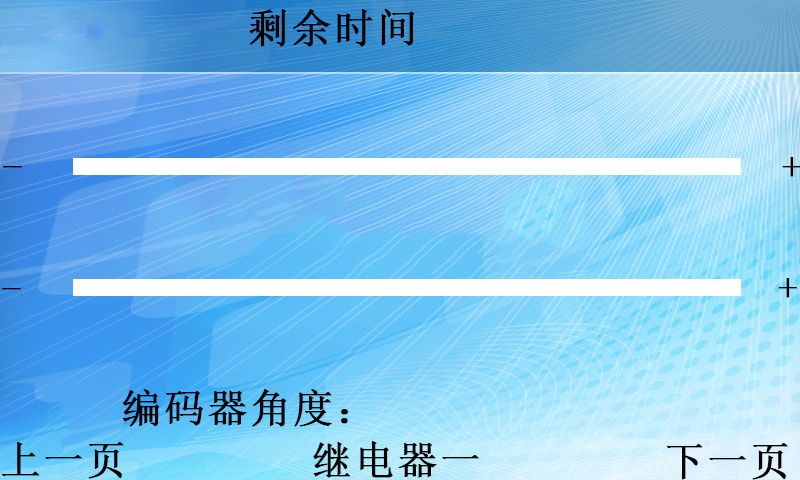
<style>
.page{position:relative;width:800px;height:480px}
.page>*{position:absolute;margin:0}
.t1{font:40px "SimSun";letter-spacing:0.05em;color:#000000;font-weight:bold}
</style>
<div class="page">
<p class="t1" style="left:249px;top:9px;width:166px;height:38px">剩余时间</p>
<p class="t1" style="left:782px;top:157px;width:19px;height:20px">+</p>
<p class="t1" style="left:3px;top:166px;width:19px;height:2px">-</p>
<p class="t1" style="left:778px;top:278px;width:19px;height:20px">+</p>
<p class="t1" style="left:2px;top:288px;width:19px;height:2px">-</p>
<p class="t1" style="left:122px;top:389px;width:226px;height:38px">编码器角度：</p>
<p class="t1" style="left:2px;top:442px;width:122px;height:37px">上一页</p>
<p class="t1" style="left:313px;top:441px;width:166px;height:37px">继电器一</p>
<p class="t1" style="left:666px;top:443px;width:122px;height:37px">下一页</p>
</div>
